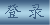
<style>
.page{position:relative;width:50px;height:25px}
.page>*{position:absolute;margin:0}
.t1{font:18px "STKaiti";color:#3e5f82}
</style>
<div class="page">
<p class="t1" style="left:5px;top:4px;width:39px;height:15px">登 录</p>
</div>
